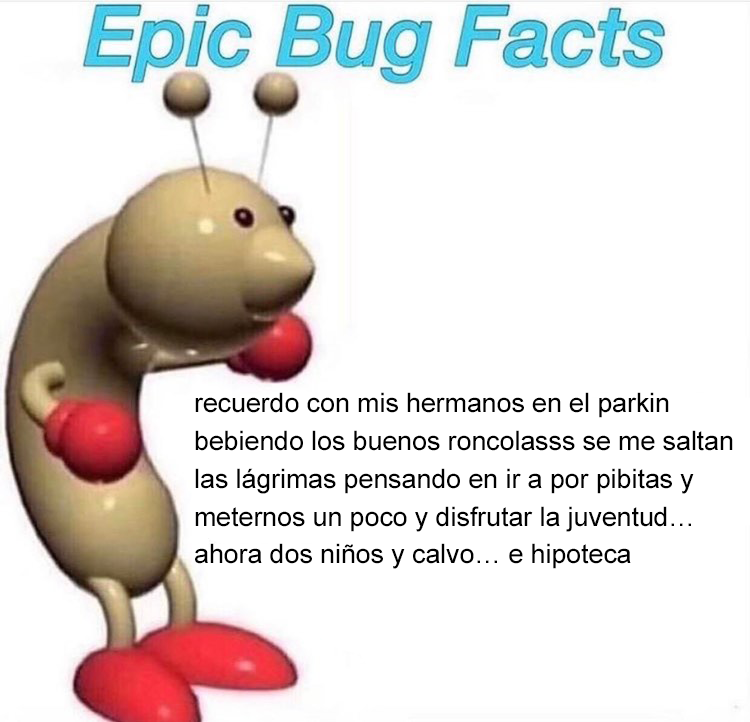
<style>
.page{position:relative;width:750px;height:722px;background:#ffffff}
.page>*{position:absolute;margin:0}
.t1{font:26.7px "ArialMT";color:#000000}
</style>
<div class="page">
<p class="t1" style="left:195px;top:392px;width:538px;height:177px">recuerdo con mis hermanos en el parkin <br>bebiendo los buenos roncolasss se me saltan<br>las lágrimas pensando en ir a por pibitas y<br>meternos un poco y disfrutar la juventud…<br>ahora dos niños y calvo… e hipoteca</p>
</div>
